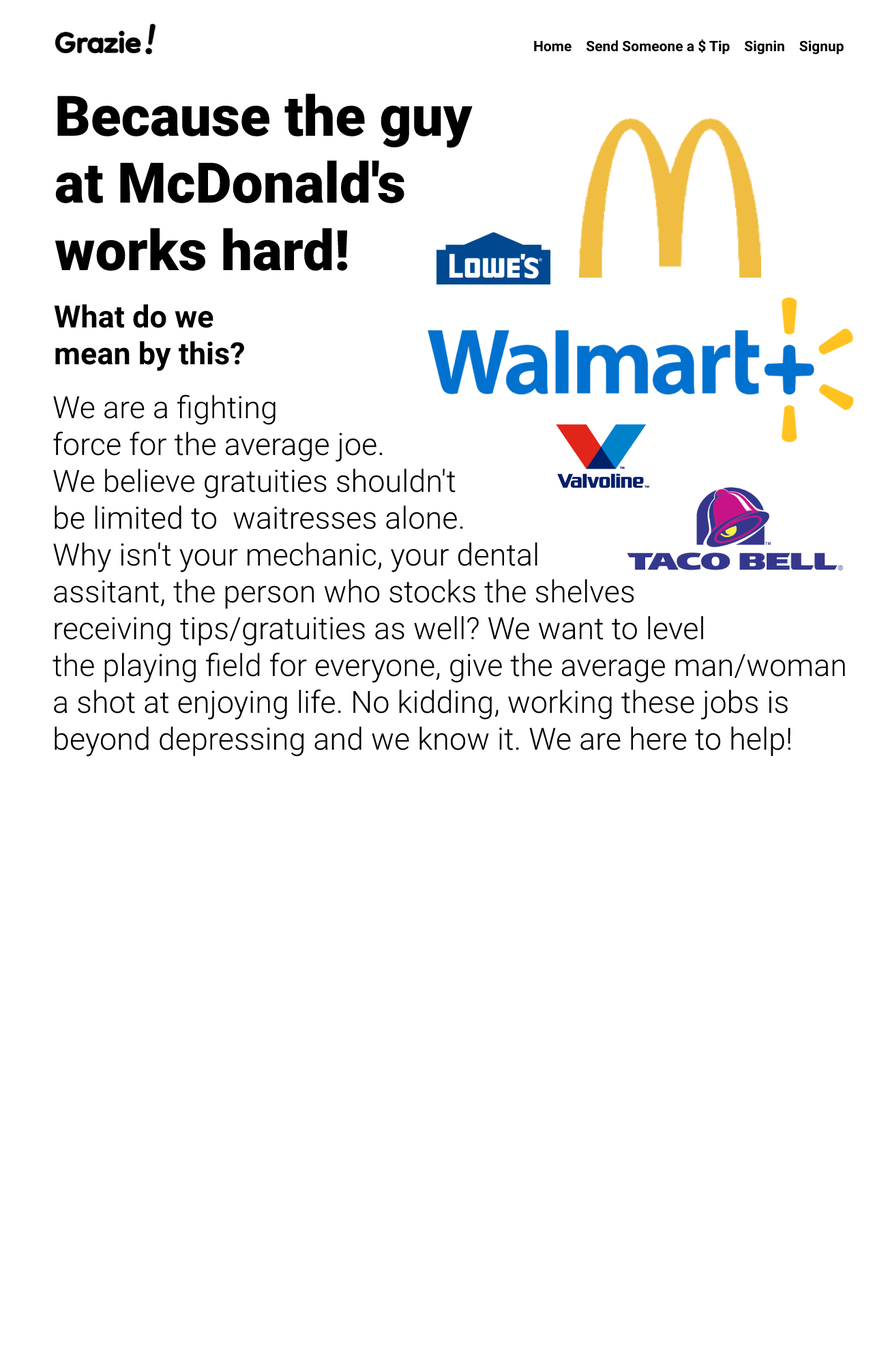
<style>
.page{position:relative;width:873px;height:1365px;background:#ffffff}
.page>*{position:absolute;margin:0}
.t1{font:14.3px "Roboto-Bold";color:#000000}
.t2{font:56px "Roboto-Black";color:#000000}
.t3{font:30.7px "Roboto-Bold";color:#000000}
.t4{font:30.7px "Roboto-Light";color:#000000}
</style>
<div class="page">
<p class="t1" style="left:534px;top:39px;width:310px;height:16px">Home    Send Someone a $ Tip    Signin    Signup</p>
<p class="t2" style="left:55px;top:93px;width:418px;height:178px">Because the guy <br>at McDonald's <br>works hard!</p>
<p class="t3" style="left:54px;top:304px;width:190px;height:67px">What do we <br>mean by this?</p>
<p class="t4" style="left:53px;top:394px;width:792px;height:363px">We are a fighting<br>force for the average joe. <br>We believe gratuities shouldn't <br>be limited to  waitresses alone. <br>Why isn't your mechanic, your dental <br>assitant, the person who stocks the shelves <br>receiving tips/gratuities as well? We want to level <br>the playing field for everyone, give the average man/woman <br>a shot at enjoying life. No kidding, working these jobs is <br>beyond depressing and we know it. We are here to help!</p>
</div>
